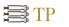
<style>
.page{position:relative;width:69px;height:27px;background:#ffffff}
.page>*{position:absolute;margin:0}
.t1{font:18px "RyuminPro-ExBold";letter-spacing:-0.08em;color:#ae9442;scale:0.9 1}
</style>
<div class="page">
<p class="t1" style="left:33px;top:7px;width:22px;height:14px">TP</p>
</div>
